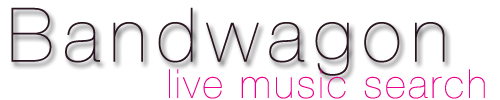
<style>
.page{position:relative;width:500px;height:100px;background:#ffffff}
.page>*{position:absolute;margin:0}
.t1{font:75px "HelveticaNeue-UltraLight";letter-spacing:0.13em;color:#281520}
.t2{font:40px "HelveticaNeue-UltraLight";letter-spacing:0.075em;color:#ec008c}
</style>
<div class="page">
<p class="t1" style="left:11px;top:7px;width:434px;height:69px">Bandwagon</p>
<p class="t2" style="left:169px;top:69px;width:316px;height:30px">live music search</p>
</div>
